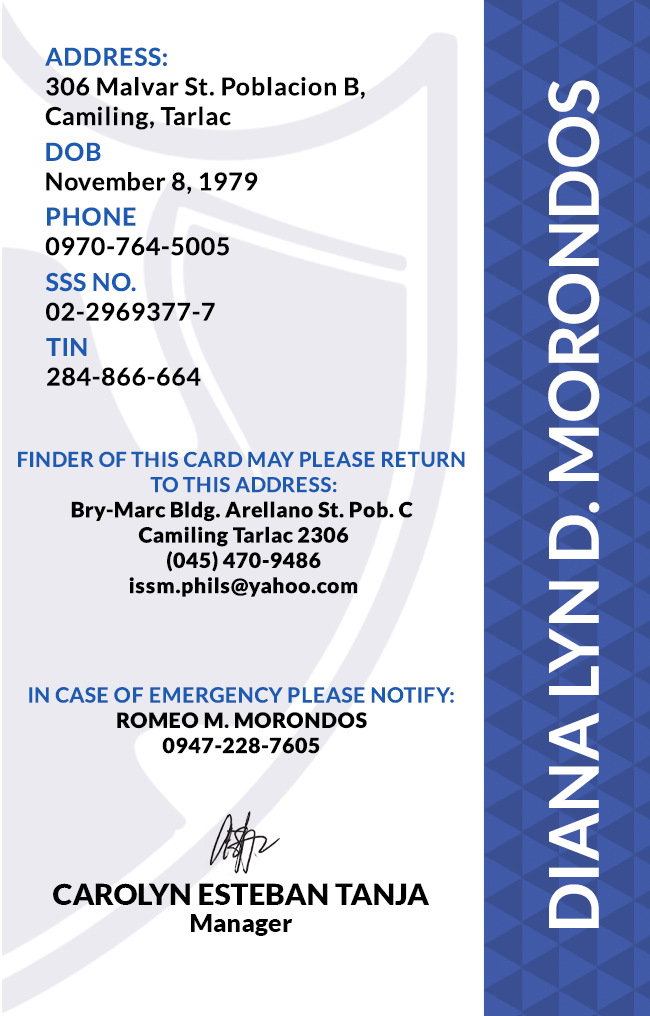
<style>
.page{position:relative;width:650px;height:1016px;background:#ffffff}
.page>*{position:absolute;margin:0}
.t1{font:24.7px/29.6px "Lato-Bold";letter-spacing:0.025em;color:#000000}
.t2{font:24.7px/29.6px "Lato-Bold";letter-spacing:0.025em;color:#1c5bb0}
.t3{font:68.8px "Lato-Bold";color:#ffffff}
.t4{font:21.1px "Lato-Black";letter-spacing:0.025em}
.t5{font:20.5px/25.3px "Lato-Bold";letter-spacing:0.025em;text-transform:uppercase}
.t6{font:21.1px/25.3px "Lato-Bold";letter-spacing:0.025em;color:#1c5bb0}
.t7{font:21.1px "Lato-Black";letter-spacing:0.025em;color:#000000}
.t8{font:29.5px "Lato-Black";color:#000000}
.t9{font:25px "Lato-Black";color:#000000}
</style>
<div class="page">
<p class="t1" style="left:45px;top:47px;width:320px;height:83px"><span class="t2">ADDRESS:<br></span>306 Malvar St. Poblacion B,<br>Camiling, Tarlac</p>
<p class="t3" style="left:548px;top:80px;width:52px;height:848px;rotate:-90deg">DIANA LYN D. MORONDOS</p>
<p class="t1" style="left:46px;top:142px;width:212px;height:52px"><span class="t2">DOB<br></span>November 8, 1979</p>
<p class="t1" style="left:45px;top:207px;width:184px;height:49px"><span class="t2">PHONE <br></span>0970-764-5005</p>
<p class="t1" style="left:45px;top:272px;width:170px;height:49px"><span class="t2">SSS NO.<br></span>02-2969377-7</p>
<p class="t1" style="left:46px;top:338px;width:155px;height:48px"><span class="t2">TIN<br></span>284-866-664</p>
<p class="t4" style="left:18px;top:451px;width:447px;height:146px;text-align:center"><span class="t5">Finder of this card may please return <br>to this address:<br></span>Bry-Marc Bldg. Arellano St. Pob. C <br>Camiling Tarlac 2306<br>(045) 470-9486<br>issm.phils@yahoo.com</p>
<p class="t6" style="left:29px;top:687px;width:425px;height:67px;text-align:center">IN CASE OF EMERGENCY PLEASE NOTIFY:<br><span class="t7">ROMEO M. MORONDOS<br>0947-228-7605</span></p>
<p class="t8" style="left:53px;top:883px;width:376px;height:22px">CAROLYN ESTEBAN TANJA</p>
<p class="t9" style="left:191px;top:914px;width:102px;height:22px">Manager</p>
</div>
